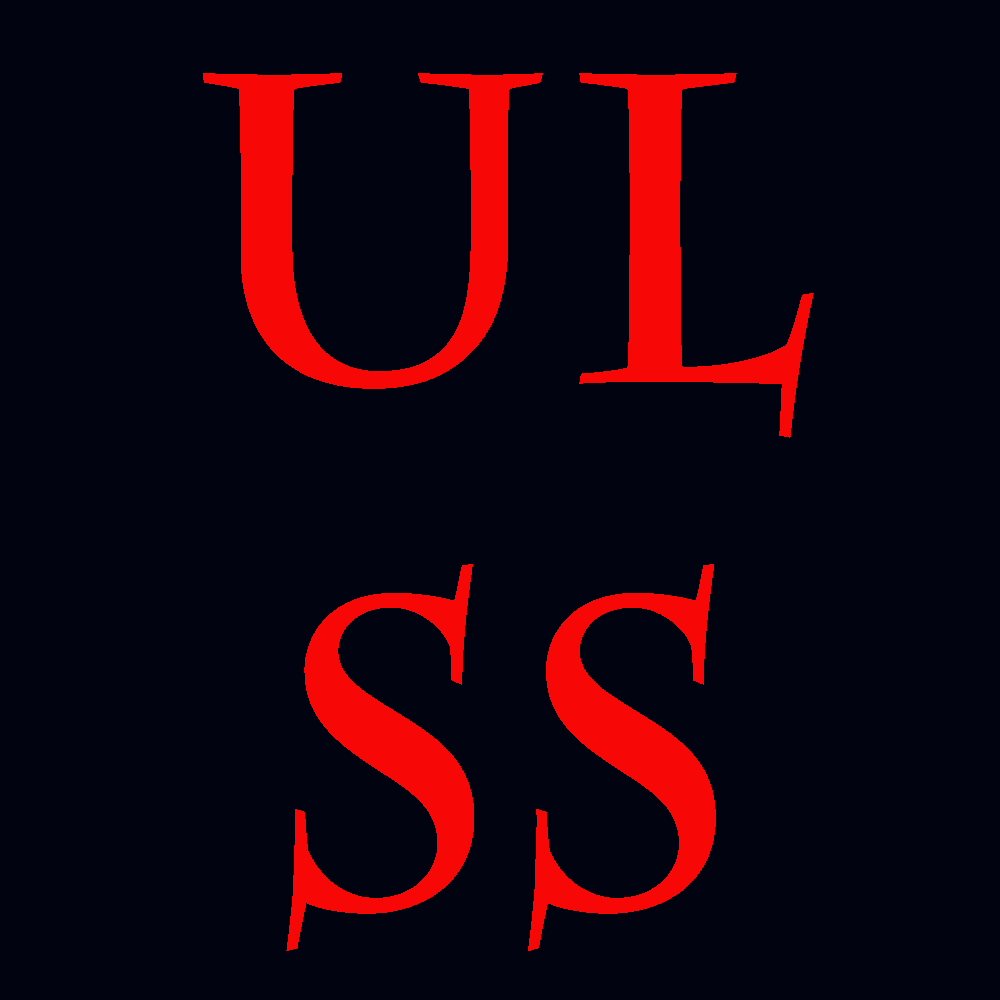
<style>
.page{position:relative;width:1000px;height:1000px;background:#020310}
.page>*{position:absolute;margin:0}
.t1{font:437.5px "CharlemagneStd-Bold";color:#f80707}
</style>
<div class="page">
<p class="t1" style="left:203px;top:73px;width:611px;height:878px;text-align:center">ul<br>ss</p>
</div>
